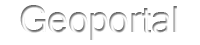
<style>
.page{position:relative;width:200px;height:45px;background:#ffffff}
.page>*{position:absolute;margin:0}
.t1{font:39.5px "Shruti"}
</style>
<div class="page">
<p class="t1" style="left:20px;top:5px;width:157px;height:35px">Geoportal</p>
</div>
